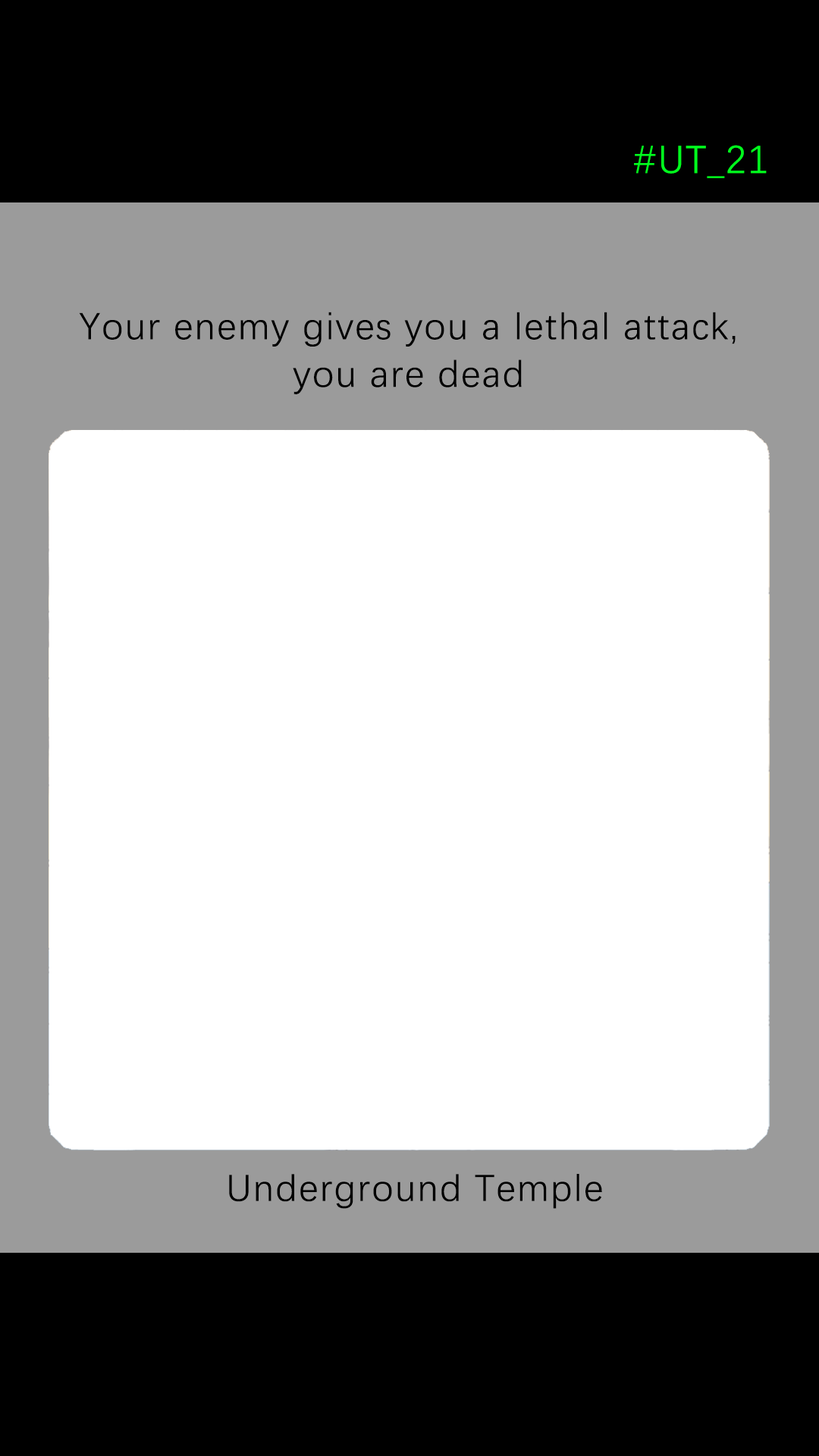
<style>
.page{position:relative;width:819px;height:1456px;background:#ffffff}
.page>*{position:absolute;margin:0}
.t1{font:39.2px "DengXian-Regular";letter-spacing:0.04em;color:#00ff1e}
.t2{font:37.9px/47.6px "DengXian-Regular";letter-spacing:0.04em;color:#000000}
.t3{font:37.9px "DengXian-Regular";letter-spacing:0.04em;color:#000000}
</style>
<div class="page">
<p class="t1" style="left:634px;top:145px;width:133px;height:33px">#UT_21</p>
<p class="t2" style="left:79px;top:312px;width:657px;height:82px;text-align:center">Your enemy gives you a lethal attack, <br>you are dead</p>
<p class="t3" style="left:229px;top:1174px;width:373px;height:35px">Underground Temple</p>
</div>
